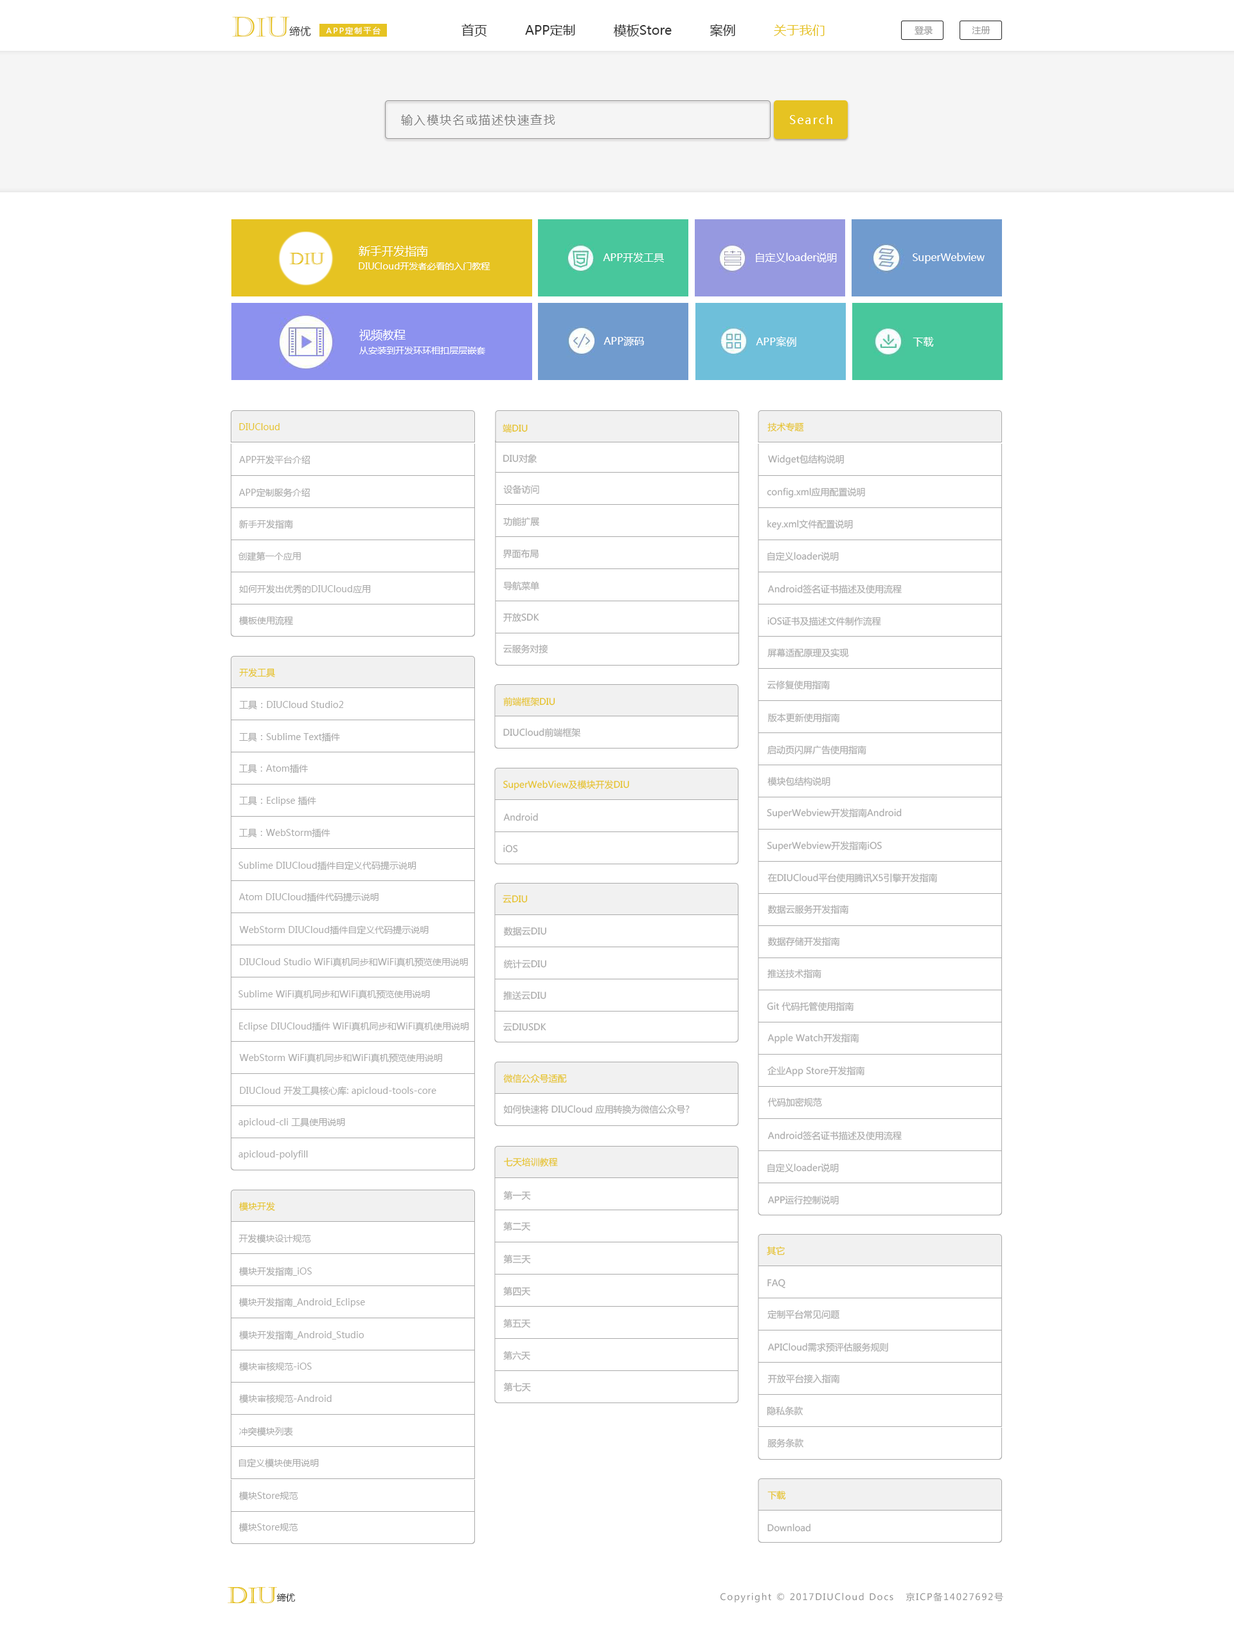
<style>
.page{position:relative;width:1234px;height:1634px;background:#ffffff}
.page>*{position:absolute;margin:0}
.t1{font:27.4px "Castellar";color:#e6c322;text-transform:uppercase}
.t2{font:25.7px "Castellar";color:#e6c322}
.t3{font:10.8px "YouYuan";color:#000000}
.t4{font:7.7px "MicrosoftYaHei";letter-spacing:0.18em;color:#ffffff}
.t5{font:12.9px "MicrosoftYaHei";color:#323232}
.t6{font:12.9px "MicrosoftYaHei";color:#e6c322}
.t7{font:9px "MicrosoftYaHei";color:#999999}
.t8{font:11.6px "MicrosoftYaHei";letter-spacing:0.12em;color:#808080}
.t9{font:11.6px "MicrosoftYaHei";letter-spacing:0.12em;color:#ffffff}
.t10{font:11.6px "MicrosoftYaHei";color:#ffffff}
.t11{font:16.5px "Castellar";color:#e6c322;text-transform:uppercase}
.t12{font:15.4px "Castellar";color:#e6c322}
.t13{font:10.3px "MicrosoftYaHei";color:#ffffff}
.t14{font:9px "MicrosoftYaHei";color:#ffffff}
.t15{font:9px "MicrosoftYaHei";color:#e6c322}
.t16{font:9px "MicrosoftYaHei";color:#aaaaaa}
.t17{font:23.4px "Castellar";color:#e6c322;text-transform:uppercase}
.t18{font:21.9px "Castellar";color:#e6c322}
.t19{font:9.2px "YouYuan"}
.t20{font:9px "MicrosoftYaHei";letter-spacing:0.12em;color:#929292}
</style>
<div class="page">
<p class="t1" style="left:232px;top:17px;width:58px;height:20px">d<span class="t2">i</span>u</p>
<p class="t3" style="left:289px;top:26px;width:22px;height:11px">缔优</p>
<p class="t4" style="left:326px;top:26px;width:55px;height:9px">APP定制平台</p>
<p class="t5" style="left:462px;top:24px;width:363px;height:13px">首页          APP定制          模板Store          案例          <span class="t6">关于我们</span></p>
<p class="t7" style="left:915px;top:26px;width:18px;height:9px">登录</p>
<p class="t7" style="left:972px;top:26px;width:19px;height:8px">注册</p>
<p class="t8" style="left:401px;top:114px;width:154px;height:11px">输入模块名或描述快速查找</p>
<p class="t9" style="left:790px;top:115px;width:43px;height:9px">Search</p>
<p class="t10" style="left:359px;top:246px;width:69px;height:10px">新手开发指南</p>
<p class="t11" style="left:289px;top:253px;width:36px;height:11px">d<span class="t12">i</span>u</p>
<p class="t13" style="left:603px;top:253px;width:61px;height:9px">APP开发工具</p>
<p class="t13" style="left:756px;top:253px;width:81px;height:9px">自定义loader说明</p>
<p class="t13" style="left:913px;top:253px;width:72px;height:11px">SuperWebview</p>
<p class="t14" style="left:359px;top:262px;width:132px;height:8px">DIUCloud开发者必看的入门教程</p>
<p class="t10" style="left:359px;top:329px;width:47px;height:12px">视频教程</p>
<p class="t13" style="left:604px;top:336px;width:40px;height:10px">APP源码</p>
<p class="t13" style="left:756px;top:336px;width:41px;height:10px">APP案例</p>
<p class="t13" style="left:913px;top:337px;width:21px;height:9px">下载</p>
<p class="t14" style="left:359px;top:346px;width:126px;height:8px">从安装到开发环环相扣层层嵌套</p>
<p class="t15" style="left:239px;top:423px;width:41px;height:7px">DIUCloud</p>
<p class="t15" style="left:503px;top:424px;width:25px;height:9px">端DIU</p>
<p class="t15" style="left:768px;top:422px;width:36px;height:9px">技术专题</p>
<p class="t16" style="left:239px;top:455px;width:71px;height:9px">APP开发平台介绍</p>
<p class="t16" style="left:503px;top:454px;width:34px;height:9px">DIU对象</p>
<p class="t16" style="left:768px;top:455px;width:76px;height:10px">Widget包结构说明</p>
<p class="t16" style="left:503px;top:485px;width:36px;height:9px">设备访问</p>
<p class="t16" style="left:239px;top:488px;width:71px;height:9px">APP定制服务介绍</p>
<p class="t16" style="left:767px;top:487px;width:98px;height:11px">config.xml应用配置说明</p>
<p class="t16" style="left:239px;top:519px;width:54px;height:10px">新手开发指南</p>
<p class="t16" style="left:503px;top:517px;width:36px;height:9px">功能扩展</p>
<p class="t16" style="left:768px;top:519px;width:85px;height:11px">key.xml文件配置说明</p>
<p class="t16" style="left:239px;top:552px;width:62px;height:9px">创建第一个应用</p>
<p class="t16" style="left:503px;top:549px;width:36px;height:9px">界面布局</p>
<p class="t16" style="left:768px;top:552px;width:71px;height:9px">自定义loader说明</p>
<p class="t16" style="left:503px;top:581px;width:36px;height:10px">导航菜单</p>
<p class="t16" style="left:239px;top:584px;width:132px;height:10px">如何开发出优秀的DIUCloud应用</p>
<p class="t16" style="left:768px;top:584px;width:134px;height:10px">Android签名证书描述及使用流程</p>
<p class="t16" style="left:239px;top:616px;width:54px;height:10px">模板使用流程</p>
<p class="t16" style="left:503px;top:613px;width:36px;height:9px">开放SDK</p>
<p class="t16" style="left:768px;top:616px;width:113px;height:10px">iOS证书及描述文件制作流程</p>
<p class="t16" style="left:503px;top:644px;width:45px;height:9px">云服务对接</p>
<p class="t16" style="left:768px;top:648px;width:81px;height:10px">屏幕适配原理及实现</p>
<p class="t15" style="left:239px;top:668px;width:36px;height:10px">开发工具</p>
<p class="t16" style="left:767px;top:680px;width:63px;height:9px">云修复使用指南</p>
<p class="t16" style="left:239px;top:700px;width:105px;height:10px">工具：DIUCloud Studio2</p>
<p class="t15" style="left:503px;top:697px;width:52px;height:9px">前端框架DIU</p>
<p class="t16" style="left:768px;top:713px;width:72px;height:9px">版本更新使用指南</p>
<p class="t16" style="left:239px;top:732px;width:101px;height:10px">工具：Sublime Text插件</p>
<p class="t16" style="left:503px;top:728px;width:78px;height:9px">DIUCloud前端框架</p>
<p class="t16" style="left:768px;top:745px;width:99px;height:9px">启动页闪屏广告使用指南</p>
<p class="t16" style="left:239px;top:764px;width:69px;height:9px">工具：Atom插件</p>
<p class="t15" style="left:503px;top:780px;width:126px;height:10px">SuperWebView及模块开发DIU</p>
<p class="t16" style="left:768px;top:777px;width:63px;height:9px">模块包结构说明</p>
<p class="t16" style="left:239px;top:796px;width:77px;height:10px">工具：Eclipse 插件</p>
<p class="t16" style="left:767px;top:808px;width:135px;height:10px">SuperWebview开发指南Android</p>
<p class="t16" style="left:503px;top:813px;width:35px;height:8px">Android</p>
<p class="t16" style="left:239px;top:828px;width:91px;height:10px">工具：WebStorm插件</p>
<p class="t16" style="left:503px;top:844px;width:15px;height:8px">iOS</p>
<p class="t16" style="left:767px;top:841px;width:115px;height:10px">SuperWebview开发指南iOS</p>
<p class="t16" style="left:239px;top:861px;width:178px;height:9px">Sublime DIUCloud插件自定义代码提示说明</p>
<p class="t16" style="left:768px;top:873px;width:170px;height:9px">在DIUCloud平台使用腾讯X5引擎开发指南</p>
<p class="t16" style="left:239px;top:892px;width:140px;height:10px">Atom DIUCloud插件代码提示说明</p>
<p class="t15" style="left:503px;top:895px;width:25px;height:8px">云DIU</p>
<p class="t16" style="left:768px;top:905px;width:81px;height:9px">数据云服务开发指南</p>
<p class="t16" style="left:239px;top:925px;width:190px;height:10px">WebStorm DIUCloud插件自定义代码提示说明</p>
<p class="t16" style="left:503px;top:926px;width:43px;height:10px">数据云DIU</p>
<p class="t16" style="left:768px;top:937px;width:72px;height:9px">数据存储开发指南</p>
<p class="t16" style="left:240px;top:957px;width:228px;height:9px">DIUCloud Studio WiFi真机同步和WiFi真机预览使用说明</p>
<p class="t16" style="left:503px;top:959px;width:43px;height:9px">统计云DIU</p>
<p class="t16" style="left:768px;top:969px;width:54px;height:9px">推送技术指南</p>
<p class="t16" style="left:239px;top:989px;width:191px;height:9px">Sublime WiFi真机同步和WiFi真机预览使用说明</p>
<p class="t16" style="left:503px;top:991px;width:43px;height:9px">推送云DIU</p>
<p class="t16" style="left:767px;top:1002px;width:87px;height:9px">Git 代码托管使用指南</p>
<p class="t16" style="left:239px;top:1022px;width:230px;height:9px">Eclipse DIUCloud插件 WiFi真机同步和WiFi真机使用说明</p>
<p class="t16" style="left:503px;top:1023px;width:43px;height:8px">云DIUSDK</p>
<p class="t16" style="left:768px;top:1033px;width:92px;height:10px">Apple Watch开发指南</p>
<p class="t16" style="left:239px;top:1053px;width:203px;height:9px">WebStorm WiFi真机同步和WiFi真机预览使用说明</p>
<p class="t15" style="left:503px;top:1074px;width:64px;height:9px">微信公众号适配</p>
<p class="t16" style="left:768px;top:1066px;width:97px;height:10px">企业App Store开发指南</p>
<p class="t16" style="left:240px;top:1086px;width:197px;height:9px">DIUCloud 开发工具核心库: apicloud-tools-core</p>
<p class="t16" style="left:768px;top:1097px;width:54px;height:9px">代码加密规范</p>
<p class="t16" style="left:503px;top:1104px;width:187px;height:10px">如何快速将 DIUCloud 应用转换为微信公众号?</p>
<p class="t16" style="left:239px;top:1117px;width:106px;height:10px">apicloud-cli 工具使用说明</p>
<p class="t16" style="left:768px;top:1131px;width:134px;height:9px">Android签名证书描述及使用流程</p>
<p class="t16" style="left:239px;top:1150px;width:69px;height:9px">apicloud-polyfill</p>
<p class="t15" style="left:504px;top:1157px;width:54px;height:9px">七天培训教程</p>
<p class="t16" style="left:768px;top:1163px;width:71px;height:9px">自定义loader说明</p>
<p class="t16" style="left:503px;top:1191px;width:28px;height:9px">第一天</p>
<p class="t15" style="left:239px;top:1202px;width:36px;height:8px">模块开发</p>
<p class="t16" style="left:768px;top:1195px;width:71px;height:9px">APP运行控制说明</p>
<p class="t16" style="left:503px;top:1221px;width:28px;height:9px">第二天</p>
<p class="t16" style="left:239px;top:1234px;width:72px;height:9px">开发模块设计规范</p>
<p class="t15" style="left:767px;top:1246px;width:18px;height:9px">其它</p>
<p class="t16" style="left:503px;top:1254px;width:28px;height:9px">第三天</p>
<p class="t16" style="left:239px;top:1266px;width:73px;height:10px">模块开发指南_iOS</p>
<p class="t16" style="left:503px;top:1286px;width:28px;height:9px">第四天</p>
<p class="t16" style="left:768px;top:1279px;width:18px;height:9px">FAQ</p>
<p class="t16" style="left:239px;top:1297px;width:126px;height:10px">模块开发指南_Android_Eclipse</p>
<p class="t16" style="left:768px;top:1310px;width:72px;height:8px">定制平台常见问题</p>
<p class="t16" style="left:503px;top:1318px;width:28px;height:10px">第五天</p>
<p class="t16" style="left:239px;top:1330px;width:125px;height:10px">模块开发指南_Android_Studio</p>
<p class="t16" style="left:768px;top:1342px;width:120px;height:9px">APICloud需求预评估服务规则</p>
<p class="t16" style="left:239px;top:1362px;width:73px;height:9px">模块审核规范-iOS</p>
<p class="t16" style="left:503px;top:1351px;width:27px;height:9px">第六天</p>
<p class="t16" style="left:768px;top:1374px;width:72px;height:9px">开放平台接入指南</p>
<p class="t16" style="left:503px;top:1382px;width:28px;height:9px">第七天</p>
<p class="t16" style="left:239px;top:1394px;width:93px;height:9px">模块审核规范-Android</p>
<p class="t16" style="left:767px;top:1406px;width:36px;height:9px">隐私条款</p>
<p class="t16" style="left:239px;top:1426px;width:54px;height:10px">冲突模块列表</p>
<p class="t16" style="left:768px;top:1438px;width:36px;height:9px">服务条款</p>
<p class="t16" style="left:239px;top:1458px;width:80px;height:9px">自定义模块使用说明</p>
<p class="t16" style="left:239px;top:1491px;width:59px;height:9px">模块Store规范</p>
<p class="t15" style="left:768px;top:1490px;width:18px;height:9px">下载</p>
<p class="t16" style="left:239px;top:1522px;width:59px;height:9px">模块Store规范</p>
<p class="t16" style="left:768px;top:1523px;width:43px;height:8px">Download</p>
<p class="t17" style="left:228px;top:1587px;width:49px;height:16px">d<span class="t18">i</span>u</p>
<p class="t19" style="left:276px;top:1592px;width:19px;height:9px">缔优</p>
<p class="t20" style="left:721px;top:1592px;width:283px;height:10px">Copyright © 2017DIUCloud Docs   京ICP备14027692号</p>
</div>
